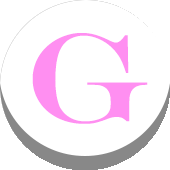
<style>
.page{position:relative;width:170px;height:170px;background:#ffffff}
.page>*{position:absolute;margin:0}
.t1{font:128px "EngraversMT";color:#ff8ff1}
</style>
<div class="page">
<p class="t1" style="left:32px;top:33px;width:116px;height:91px">G</p>
</div>
